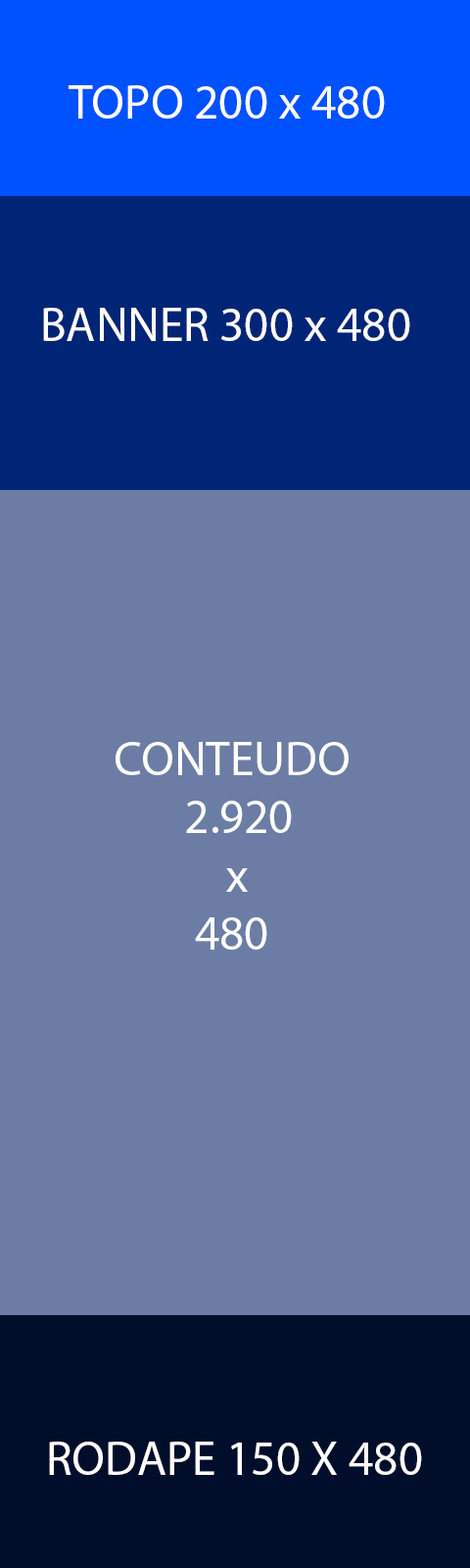
<style>
.page{position:relative;width:470px;height:1568px;background:#6b7da5}
.page>*{position:absolute;margin:0}
.t1{font:48.4px "MyriadPro-Regular";color:#ffffff}
</style>
<div class="page">
<p class="t1" style="left:69px;top:85px;width:316px;height:34px">TOPO 200 x 480</p>
<p class="t1" style="left:43px;top:308px;width:368px;height:33px">BANNER 300 x 480</p>
<p class="t1" style="left:116px;top:742px;width:233px;height:208px">CONTEUDO<br>  2.920<br>           x<br>   480</p>
<p class="t1" style="left:49px;top:1442px;width:373px;height:33px">RODAPE 150 X 480</p>
</div>
